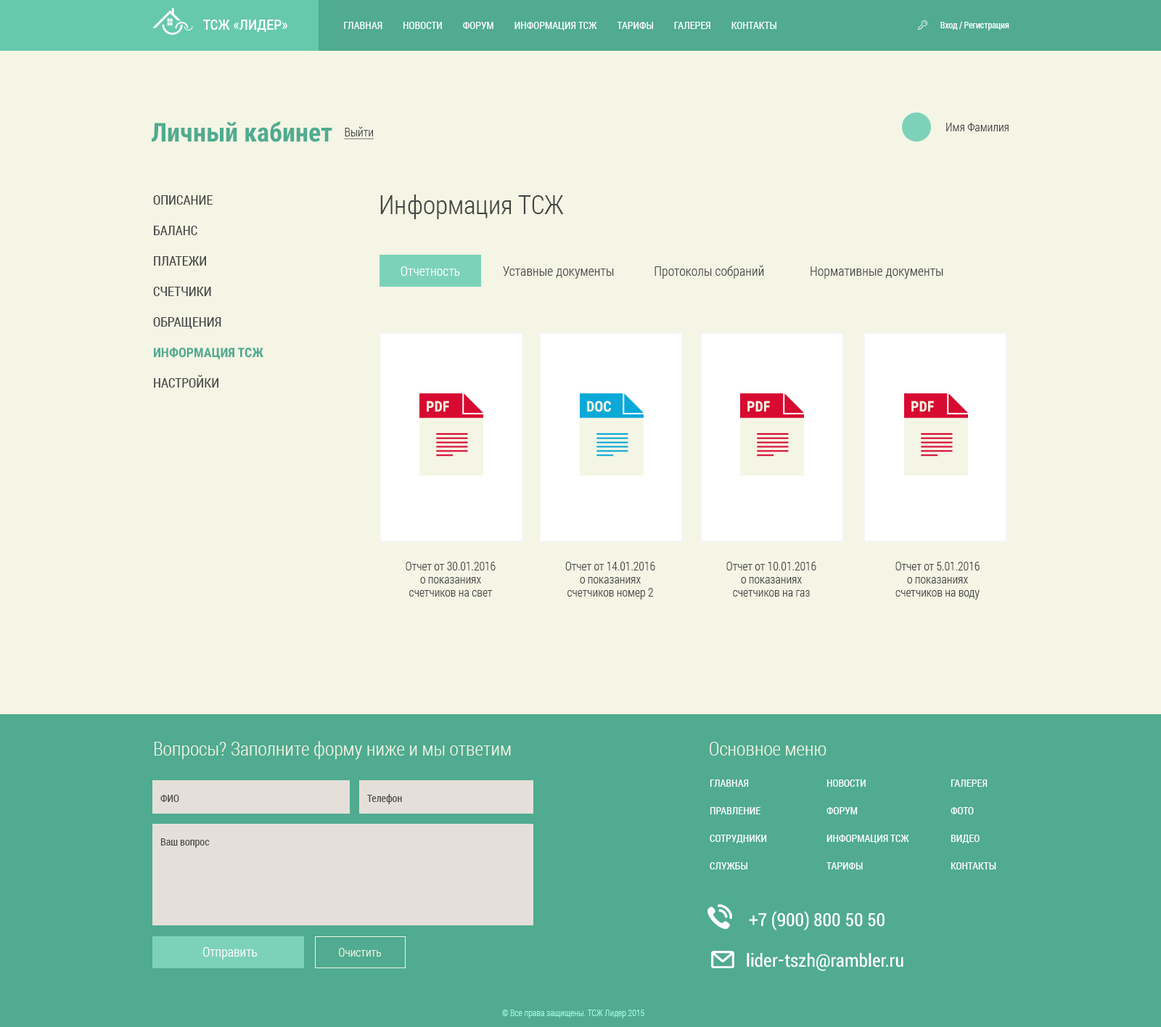
<style>
.page{position:relative;width:1161px;height:1027px;background:#f5f5e5}
.page>*{position:absolute;margin:0}
.t1{font:14.5px "RobotoCondensed-Regular";letter-spacing:0.005em;color:#ffffff}
.t2{font:10.2px "RobotoCondensed-Regular";letter-spacing:0.005em;color:#ffffff}
.t3{font:8.7px "RobotoCondensed-Regular";color:#ffffff}
.t4{font:26.1px "RobotoCondensed-Bold";color:#50ab90}
.t5{font:11.6px "RobotoCondensed-Light";color:#454545}
.t6{font:11.6px "RobotoCondensed-Light";color:#454545;text-decoration:underline}
.t7{font:13.1px/30.5px "RobotoCondensed-Regular";color:#454545}
.t8{font:13.1px/30.5px "RobotoCondensed-Bold";color:#50ab90}
.t9{font:26.1px "RobotoCondensed-Light";color:#454545}
.t10{font:13.1px "RobotoCondensed-Light";letter-spacing:0.005em;color:#48494a}
.t11{font:13.1px "RobotoCondensed-Light";letter-spacing:0.005em;color:#ffffff}
.t12{font:14.5px "RobotoCondensed-Bold";color:#f5f5e5}
.t13{font:11.6px/13.1px "RobotoCondensed-Light";color:#454545}
.t14{font:18.9px "RobotoCondensed-Light";color:#f5f5e5}
.t15{font:10.2px/27.6px "RobotoCondensed-Regular";color:#ffffff}
.t16{font:10.2px "RobotoCondensed-Regular";color:#4c4a46}
.t17{font:18.9px "Roboto-Condensed";color:#ffffff}
.t18{font:13.1px "RobotoCondensed-Light";color:#ffffff}
.t19{font:11.6px "RobotoCondensed-Light";color:#f5f5e5}
.t20{font:8.7px "RobotoCondensed-Light";color:#a6fde3}
</style>
<div class="page">
<p class="t1" style="left:203px;top:20px;width:84px;height:12px">ТСЖ «ЛИДЕР»</p>
<p class="t2" style="left:344px;top:22px;width:433px;height:8px">ГЛАВНАЯ         НОВОСТИ         ФОРУМ         ИНФОРМАЦИЯ ТСЖ         ТАРИФЫ         ГАЛЕРЕЯ         КОНТАКТЫ</p>
<p class="t3" style="left:941px;top:22px;width:68px;height:8px">Вход / Регистрация</p>
<p class="t4" style="left:152px;top:121px;width:180px;height:21px">Личный кабинет</p>
<p class="t5" style="left:946px;top:123px;width:63px;height:8px">Имя Фамилия</p>
<p class="t6" style="left:344px;top:126px;width:30px;height:13px">Выйти</p>
<p class="t7" style="left:153px;top:195px;width:110px;height:193px">ОПИСАНИЕ<br>БАЛАНС<br>ПЛАТЕЖИ<br>СЧЕТЧИКИ<br>ОБРАЩЕНИЯ<br><span class="t8">ИНФОРМАЦИЯ ТСЖ<br></span>НАСТРОЙКИ</p>
<p class="t9" style="left:380px;top:194px;width:184px;height:25px">Информация ТСЖ</p>
<p class="t10" style="left:401px;top:265px;width:542px;height:14px"><span class="t11">Отчетность   </span>            Уставные документы              Протоколы собраний                Нормативные документы</p>
<p class="t12" style="left:427px;top:401px;width:22px;height:10px">PDF</p>
<p class="t12" style="left:587px;top:401px;width:24px;height:11px">DOC</p>
<p class="t12" style="left:748px;top:401px;width:22px;height:10px">PDF</p>
<p class="t12" style="left:912px;top:401px;width:22px;height:10px">PDF</p>
<p class="t13" style="left:406px;top:562px;width:90px;height:35px;text-align:center">Отчет от 30.01.2016<br>о показаниях<br>счетчиков на свет</p>
<p class="t13" style="left:565px;top:562px;width:90px;height:37px;text-align:center">Отчет от 14.01.2016<br>о показаниях<br>счетчиков номер 2</p>
<p class="t13" style="left:726px;top:562px;width:90px;height:35px;text-align:center">Отчет от 10.01.2016<br>о показаниях<br>счетчиков на газ</p>
<p class="t13" style="left:896px;top:562px;width:84px;height:37px;text-align:center">Отчет от 5.01.2016<br>о показаниях<br>счетчиков на воду</p>
<p class="t14" style="left:155px;top:741px;width:356px;height:18px">Вопросы? Заполните форму ниже и мы ответим</p>
<p class="t14" style="left:710px;top:742px;width:117px;height:13px">Основное меню</p>
<p class="t15" style="left:710px;top:779px;width:57px;height:90px">ГЛАВНАЯ<br>ПРАВЛЕНИЕ<br>СОТРУДНИКИ<br>СЛУЖБЫ</p>
<p class="t15" style="left:827px;top:779px;width:82px;height:90px">НОВОСТИ<br>ФОРУМ<br>ИНФОРМАЦИЯ ТСЖ<br>ТАРИФЫ</p>
<p class="t15" style="left:951px;top:779px;width:45px;height:90px">ГАЛЕРЕЯ<br>ФОТО<br>ВИДЕО<br>КОНТАКТЫ</p>
<p class="t16" style="left:160px;top:795px;width:19px;height:7px">ФИО</p>
<p class="t16" style="left:367px;top:794px;width:35px;height:10px">Телефон</p>
<p class="t16" style="left:160px;top:838px;width:50px;height:10px">Ваш вопрос</p>
<p class="t17" style="left:749px;top:911px;width:136px;height:19px">+7 (900) 800 50 50</p>
<p class="t18" style="left:203px;top:947px;width:54px;height:12px">Отправить</p>
<p class="t19" style="left:339px;top:948px;width:42px;height:9px">Очистить</p>
<p class="t17" style="left:747px;top:953px;width:157px;height:18px">lider-tszh@rambler.ru</p>
<p class="t20" style="left:502px;top:1009px;width:142px;height:9px">© Все права защищены. ТСЖ Лидер 2015</p>
</div>
